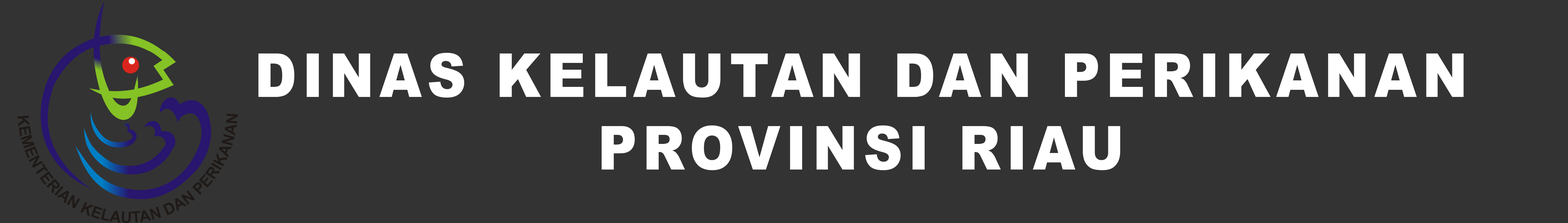
<style>
.page{position:relative;width:1568px;height:223px;background:#333333}
.page>*{position:absolute;margin:0}
.t1{font:60.5px "Arial-Black";letter-spacing:0.1em;color:#ffffff;scale:0.9 1}
</style>
<div class="page">
<p class="t1" style="left:258px;top:53px;width:1206px;height:117px;text-align:center">DINAS KELAUTAN DAN PERIKANAN<br>PROVINSI RIAU</p>
</div>
